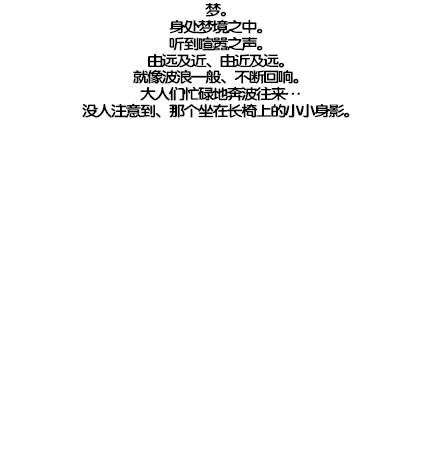
<style>
.page{position:relative;width:440px;height:476px;background:#ffffff}
.page>*{position:absolute;margin:0}
.t1{font:14.7px/16.8px "FZY4K--GBK1-0";letter-spacing:-0.13em;color:#000000;scale:1.14 1}
</style>
<div class="page">
<p class="t1" style="left:82px;top:3px;width:268px;height:115px;text-align:center">梦。<br>身处梦境之中。<br>听到喧嚣之声。<br>由远及近、由近及远。<br>就像波浪一般、不断回响。<br>大人们忙碌地奔波往来…<br>没人注意到、那个坐在长椅上的小小身影。</p>
</div>
